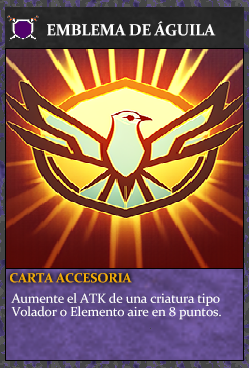
<style>
.page{position:relative;width:249px;height:368px}
.page>*{position:absolute;margin:0}
.t1{font:16px "Constantia-Bold";letter-spacing:-0.02em;color:#ffffff}
.t2{font:13.3px "Constantia-Bold";letter-spacing:-0.02em;color:#f2ac05}
.t3{font:13.3px/13.3px "Constantia";letter-spacing:-0.02em;color:#ffffff}
</style>
<div class="page">
<p class="t1" style="left:47px;top:21px;width:169px;height:15px">EMBLEMA DE ÁGUILA</p>
<p class="t2" style="left:10px;top:273px;width:122px;height:10px">CARTA ACCESORIA</p>
<p class="t3" style="left:11px;top:293px;width:210px;height:27px">Aumente el ATK de una criatura tipo<br>Volador o Elemento aire en 8 puntos.</p>
</div>
